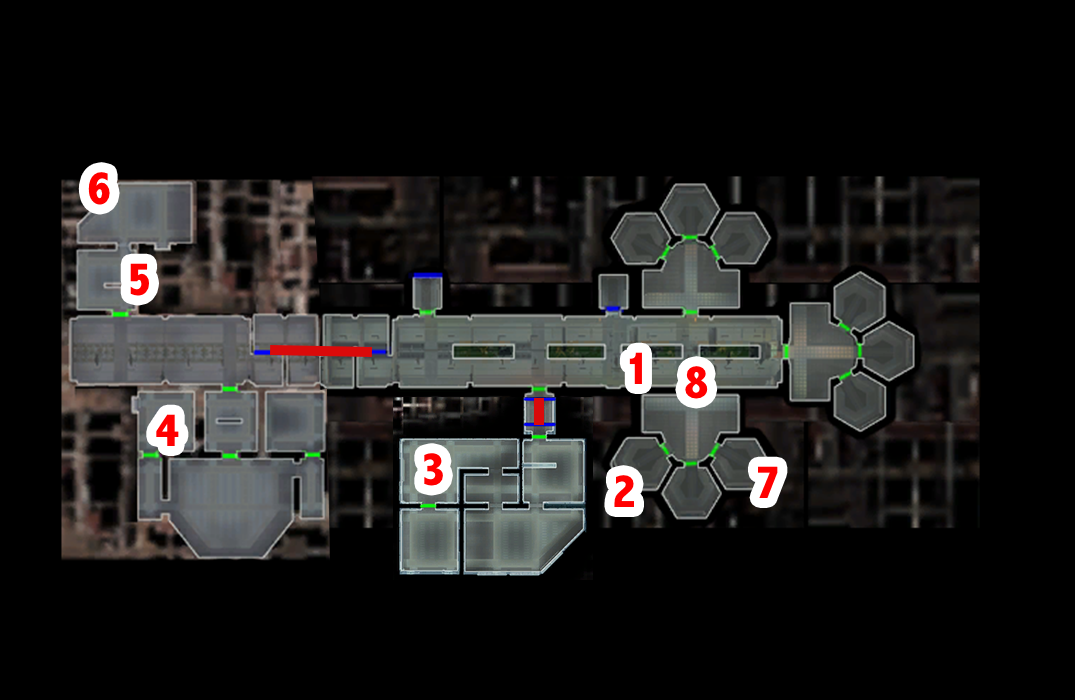
<style>
.page{position:relative;width:1075px;height:700px;background:#000000}
.page>*{position:absolute;margin:0}
.t1{font:48px "AbadiMT-CondensedExtraBold";color:#ff0000}
</style>
<div class="page">
<p class="t1" style="left:88px;top:172px;width:22px;height:33px">6</p>
<p class="t1" style="left:130px;top:263px;width:19px;height:33px">5</p>
<p class="t1" style="left:629px;top:352px;width:13px;height:32px">1</p>
<p class="t1" style="left:685px;top:366px;width:23px;height:33px">8</p>
<p class="t1" style="left:156px;top:414px;width:23px;height:32px">4</p>
<p class="t1" style="left:424px;top:453px;width:19px;height:33px">3</p>
<p class="t1" style="left:758px;top:466px;width:20px;height:32px">7</p>
<p class="t1" style="left:614px;top:475px;width:20px;height:32px">2</p>
</div>
